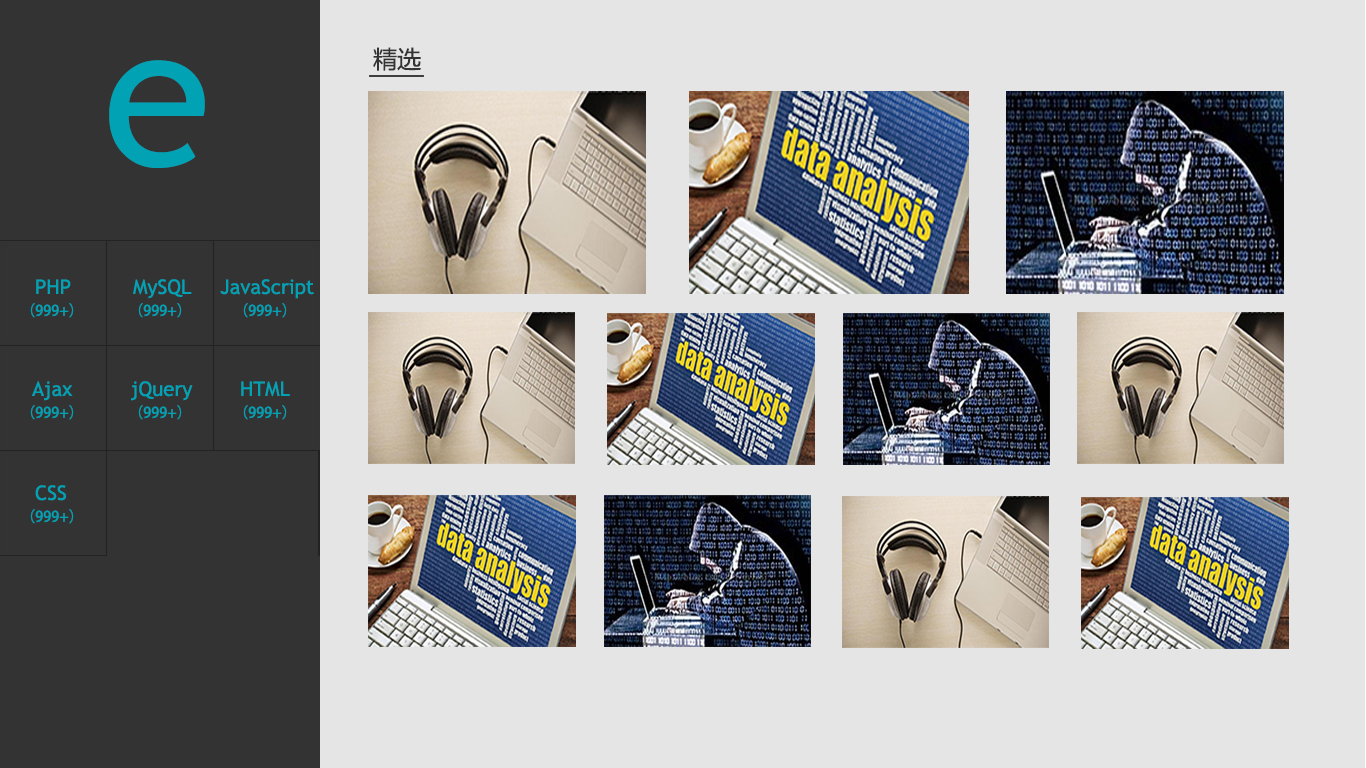
<style>
.page{position:relative;width:1366px;height:768px;background:#e5e5e5}
.page>*{position:absolute;margin:0}
.t1{font:24px "MicrosoftYaHei";color:#333333}
.t2{font:198.3px "TrebuchetMS";color:#02a2b5}
.t3{font:20.1px "TrebuchetMS";color:#02a2b5}
.t4{font:14.6px "AdobeHeitiStd-Regular";color:#02a2b5}
</style>
<div class="page">
<p class="t1" style="left:373px;top:47px;width:48px;height:24px">精选</p>
<p class="t2" style="left:109px;top:60px;width:96px;height:108px">e</p>
<p class="t3" style="left:36px;top:279px;width:35px;height:15px">PHP</p>
<p class="t3" style="left:133px;top:279px;width:59px;height:20px">MySQL</p>
<p class="t3" style="left:220px;top:279px;width:94px;height:20px">JavaScript</p>
<p class="t4" style="left:30px;top:303px;width:44px;height:15px">（999+）</p>
<p class="t4" style="left:138px;top:303px;width:44px;height:15px">（999+）</p>
<p class="t4" style="left:243px;top:303px;width:44px;height:15px">（999+）</p>
<p class="t3" style="left:32px;top:381px;width:41px;height:20px">Ajax</p>
<p class="t3" style="left:131px;top:381px;width:62px;height:20px">jQuery</p>
<p class="t3" style="left:241px;top:381px;width:49px;height:16px">HTML</p>
<p class="t4" style="left:30px;top:405px;width:44px;height:15px">（999+）</p>
<p class="t4" style="left:138px;top:405px;width:44px;height:15px">（999+）</p>
<p class="t4" style="left:243px;top:405px;width:44px;height:15px">（999+）</p>
<p class="t3" style="left:35px;top:485px;width:31px;height:16px">CSS</p>
<p class="t4" style="left:30px;top:509px;width:44px;height:15px">（999+）</p>
</div>
